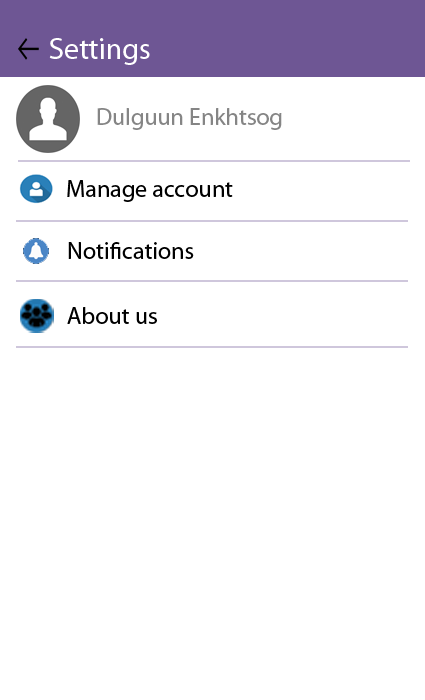
<style>
.page{position:relative;width:425px;height:700px;background:#ffffff}
.page>*{position:absolute;margin:0}
.t1{font:30px "MyriadPro-Regular";color:#ffffff}
.t2{font:24px "MyriadPro-Regular";color:#858585}
.t3{font:24px "MyriadPro-Regular";color:#000000}
</style>
<div class="page">
<p class="t1" style="left:49px;top:38px;width:101px;height:27px">Settings</p>
<p class="t2" style="left:97px;top:108px;width:185px;height:22px">Dulguun Enkhtsog</p>
<p class="t3" style="left:67px;top:180px;width:166px;height:22px">Manage account</p>
<p class="t3" style="left:68px;top:242px;width:126px;height:17px">Notifications</p>
<p class="t3" style="left:67px;top:307px;width:90px;height:17px">About us</p>
</div>
